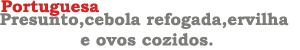
<style>
.page{position:relative;width:300px;height:50px;background:#ffffff}
.page>*{position:absolute;margin:0}
.t1{font:17px "BookmanOldStyle-Bold";color:#d42525}
.t2{font:17px "BookmanOldStyle-Bold";color:#7c7c79}
</style>
<div class="page">
<p class="t1" style="left:1px;top:0px;width:98px;height:16px">Portuguesa</p>
<p class="t2" style="left:0px;top:12px;width:289px;height:34px;text-align:center">Presunto,cebola refogada,ervilha <br>e ovos cozidos.</p>
</div>
